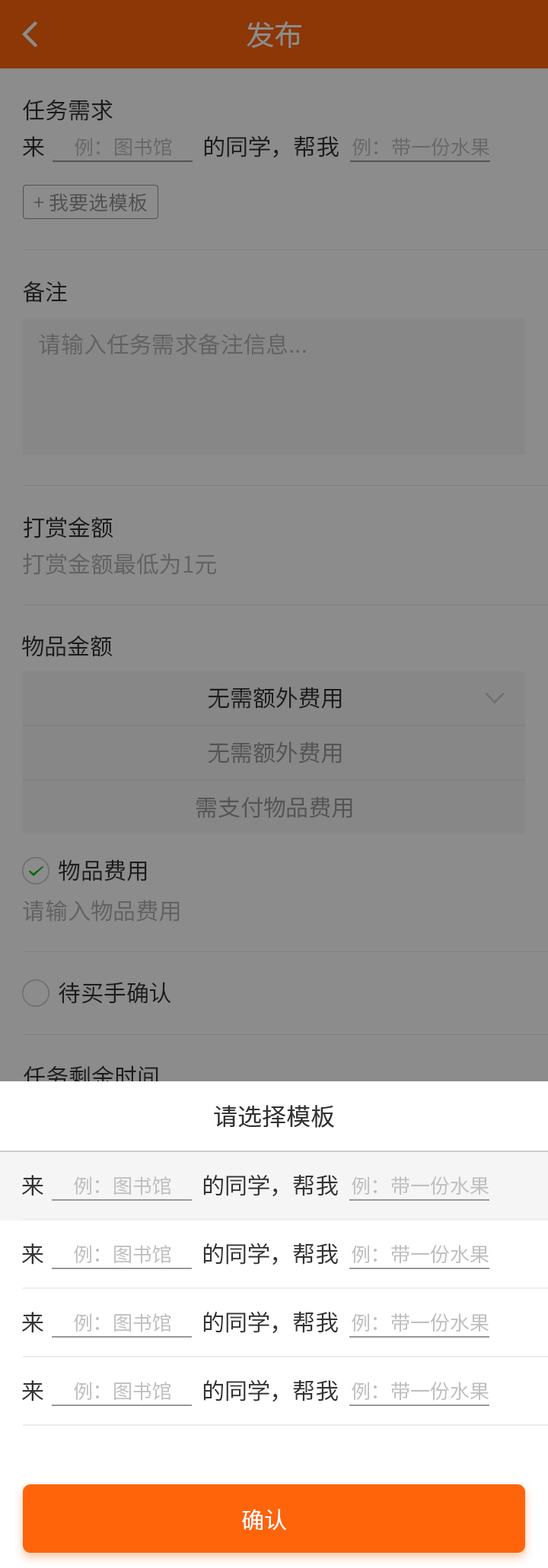
<style>
.page{position:relative;width:548px;height:1568px;background:#8c8c8c}
.page>*{position:absolute;margin:0}
.t1{font:27.4px "MicrosoftYaHei";letter-spacing:0.03em;color:#8c8c8c}
.t2{font:22.8px "NotoSansCJKsc-DemiLight";color:#333333}
.t3{font:19.8px "NotoSansCJKsc-DemiLight";color:#696969}
.t4{font:19.8px "NotoSansCJKsc-DemiLight";color:#515151}
.t5{font:22.8px "NotoSansCJKsc-DemiLight";color:#626262}
.t6{font:22.8px "NotoSansCJKsc-DemiLight";color:#545454}
.t7{font:24.3px "NotoSansCJKsc-Regular";color:#333333}
.t8{font:19.8px "NotoSansCJKsc-DemiLight";color:#bfbfbf}
.t9{font:22.8px "NotoSansCJKsc-DemiLight";color:#ffffff}
</style>
<div class="page">
<p class="t1" style="left:246px;top:21px;width:55px;height:27px">发布</p>
<p class="t2" style="left:23px;top:100px;width:90px;height:21px">任务需求</p>
<p class="t2" style="left:23px;top:135px;width:315px;height:23px">来                               的同学，帮我</p>
<p class="t3" style="left:75px;top:138px;width:96px;height:19px">例：图书馆</p>
<p class="t3" style="left:352px;top:138px;width:137px;height:19px">例：带一份水果</p>
<p class="t4" style="left:33px;top:192px;width:114px;height:20px">+ 我要选模板</p>
<p class="t2" style="left:23px;top:281px;width:44px;height:22px">备注</p>
<p class="t5" style="left:39px;top:333px;width:267px;height:22px">请输入任务需求备注信息...</p>
<p class="t2" style="left:24px;top:516px;width:89px;height:22px">打赏金额</p>
<p class="t5" style="left:23px;top:553px;width:193px;height:22px">打赏金额最低为1元</p>
<p class="t2" style="left:22px;top:635px;width:91px;height:22px">物品金额</p>
<p class="t2" style="left:208px;top:687px;width:133px;height:22px">无需额外费用</p>
<p class="t6" style="left:208px;top:741px;width:133px;height:22px">无需额外费用</p>
<p class="t6" style="left:195px;top:796px;width:157px;height:22px">需支付物品费用</p>
<p class="t2" style="left:59px;top:859px;width:88px;height:22px">物品费用</p>
<p class="t5" style="left:23px;top:900px;width:156px;height:22px">请输入物品费用</p>
<p class="t2" style="left:59px;top:982px;width:112px;height:22px">待买手确认</p>
<p class="t2" style="left:24px;top:1065px;width:134px;height:22px">任务剩余时间</p>
<p class="t7" style="left:214px;top:1105px;width:120px;height:23px">请选择模板</p>
<p class="t2" style="left:22px;top:1174px;width:316px;height:23px">来                               的同学，帮我</p>
<p class="t8" style="left:74px;top:1176px;width:96px;height:19px">例：图书馆</p>
<p class="t8" style="left:351px;top:1176px;width:137px;height:19px">例：带一份水果</p>
<p class="t2" style="left:22px;top:1243px;width:316px;height:22px">来                               的同学，帮我</p>
<p class="t8" style="left:74px;top:1245px;width:96px;height:19px">例：图书馆</p>
<p class="t8" style="left:351px;top:1245px;width:137px;height:19px">例：带一份水果</p>
<p class="t2" style="left:22px;top:1311px;width:316px;height:23px">来                               的同学，帮我</p>
<p class="t8" style="left:74px;top:1313px;width:96px;height:19px">例：图书馆</p>
<p class="t8" style="left:351px;top:1313px;width:137px;height:19px">例：带一份水果</p>
<p class="t2" style="left:22px;top:1379px;width:316px;height:23px">来                               的同学，帮我</p>
<p class="t8" style="left:74px;top:1382px;width:96px;height:19px">例：图书馆</p>
<p class="t8" style="left:351px;top:1382px;width:137px;height:19px">例：带一份水果</p>
<p class="t9" style="left:242px;top:1509px;width:45px;height:22px">确认</p>
</div>
